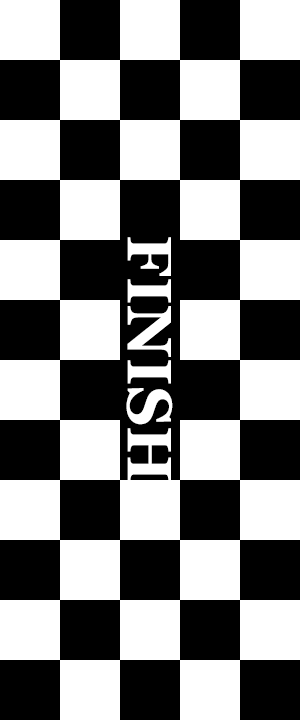
<style>
.page{position:relative;width:300px;height:720px;background:#000000}
.page>*{position:absolute;margin:0}
.t1{font:62.5px "Georgia-Bold";color:#ffffff}
</style>
<div class="page">
<p class="t1" style="left:126px;top:237px;width:47px;height:244px;rotate:90deg">FINISH</p>
</div>
